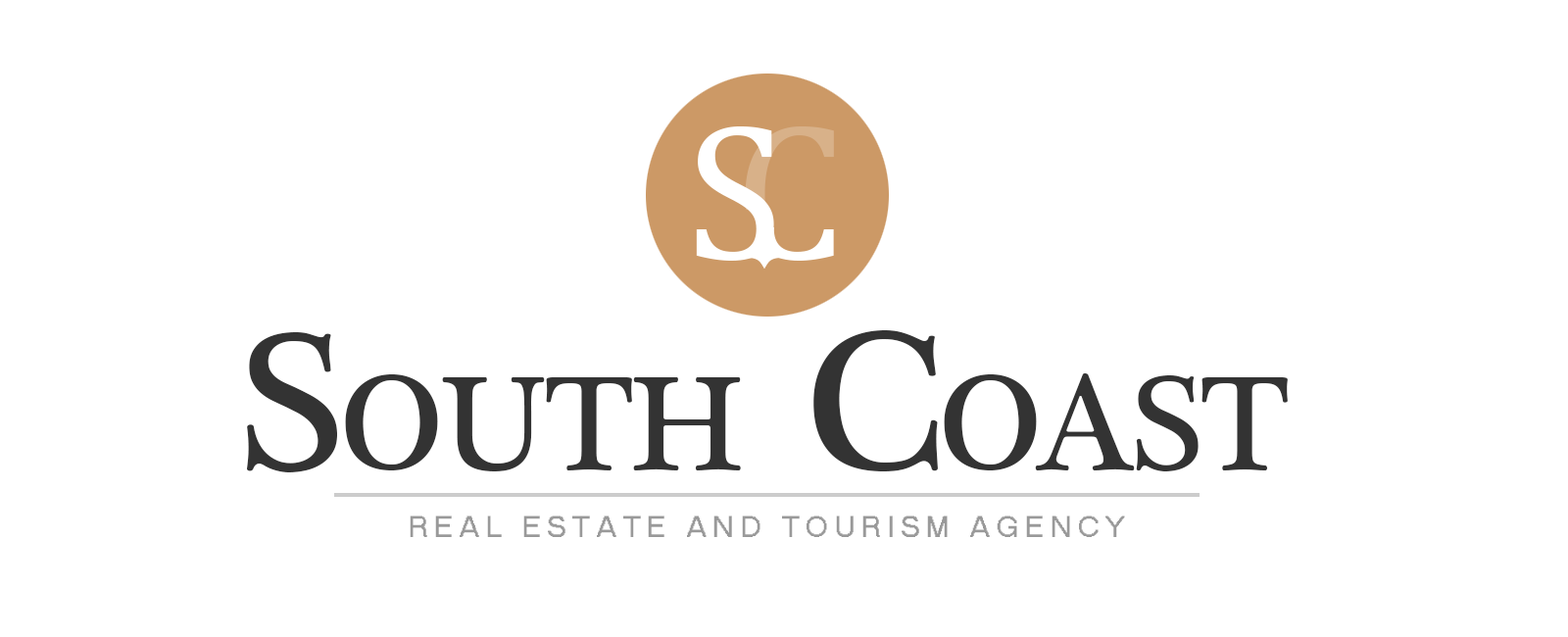
<style>
.page{position:relative;width:1568px;height:637px;background:#ffffff}
.page>*{position:absolute;margin:0}
.t1{font:137.2px "PlantagenetCherokee";letter-spacing:-0.025em;color:#333333}
.t2{font:200.9px "PlantagenetCherokee";letter-spacing:-0.025em;color:#333333}
.t3{font:29.4px "MS Sans Serif";letter-spacing:0.2em;color:#999999;text-transform:uppercase}
</style>
<div class="page">
<p class="t1" style="left:247px;top:330px;width:1041px;height:142px"><span class="t2">S</span>OUTH  <span class="t2">C</span>OAST</p>
<p class="t3" style="left:410px;top:515px;width:715px;height:22px">real estate and tourism agency</p>
</div>
